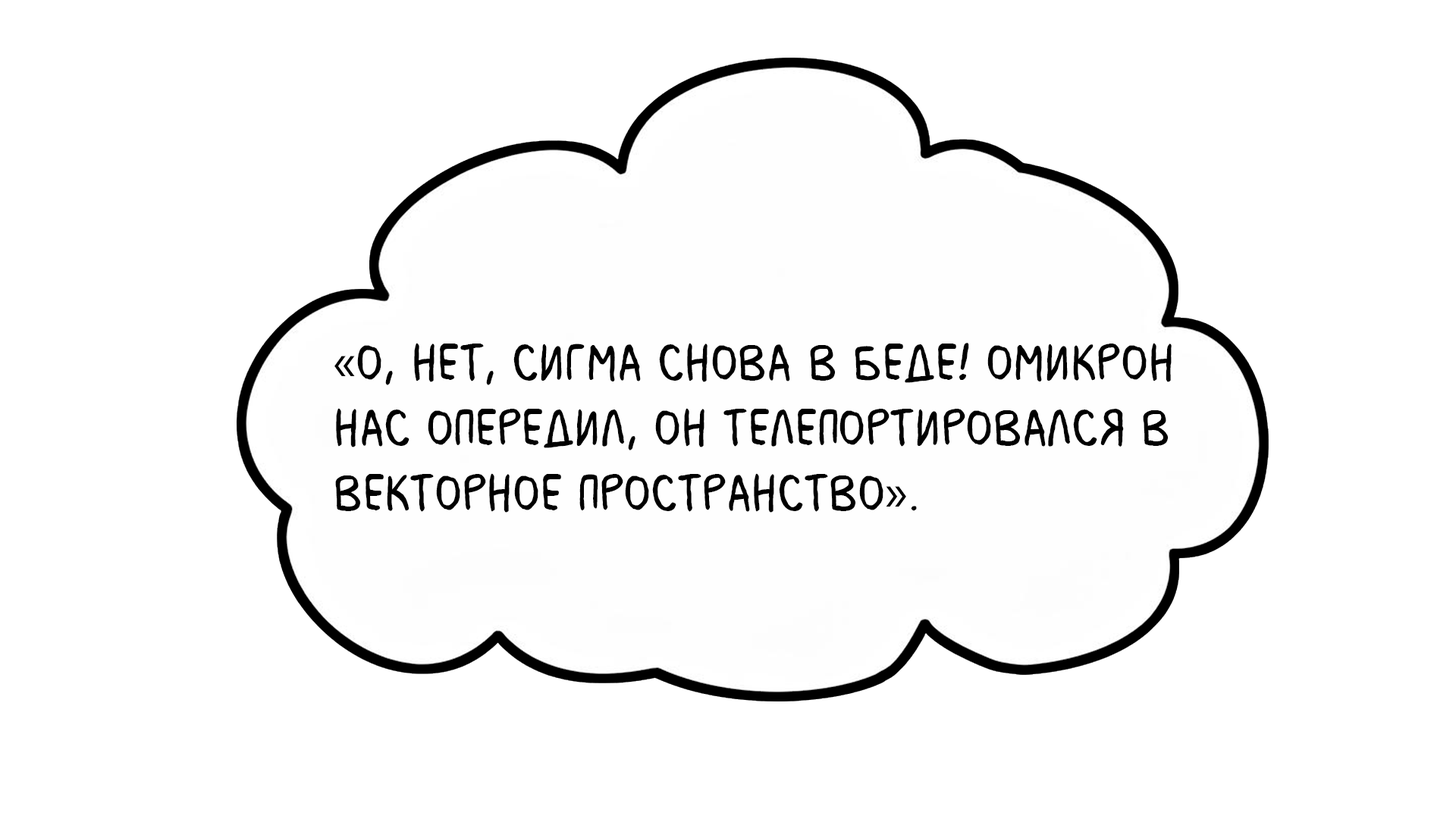
<style>
.page{position:relative;width:1456px;height:819px;background:#ffffff}
.page>*{position:absolute;margin:0}
.t1{font:54.6px "MilkMustacheBB";color:#000000}
.t2{font:54.6px "MyriadPro-Regular";color:#000000}
</style>
<div class="page">
<p class="t1" style="left:334px;top:343px;width:838px;height:170px"><span class="t2">«</span>О, нет, Сигма снова в беде! Омикрон <br>нас опередил, он телепортировался в <br>векторное пространство<span class="t2">»</span>.</p>
</div>
